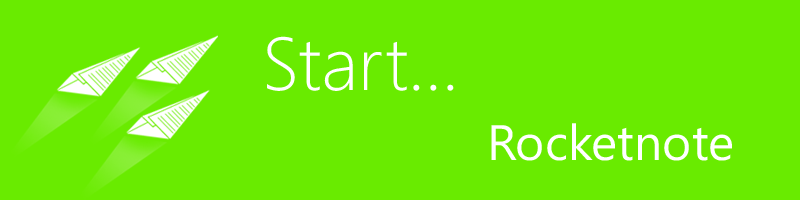
<style>
.page{position:relative;width:800px;height:200px;background:#69eb00}
.page>*{position:absolute;margin:0}
.t1{font:74.7px "SegoeWP-Light";color:#ffffff}
.t2{font:49.8px "SegoeWP";color:#ffffff}
</style>
<div class="page">
<p class="t1" style="left:267px;top:36px;width:187px;height:55px">Start...</p>
<p class="t2" style="left:491px;top:123px;width:241px;height:38px">Rocketnote</p>
</div>
